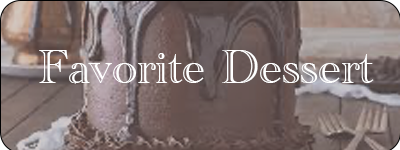
<style>
.page{position:relative;width:400px;height:150px}
.page>*{position:absolute;margin:0}
.t1{font:50px "AcademyEngravedLetPlain";color:#ffffff}
</style>
<div class="page">
<p class="t1" style="left:39px;top:50px;width:335px;height:34px">Favorite Dessert</p>
</div>
